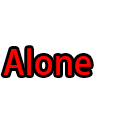
<style>
.page{position:relative;width:128px;height:128px;background:#ffffff}
.page>*{position:absolute;margin:0}
.t1{font:33.3px "AdobeHeitiStd-Regular";color:#ff0202}
</style>
<div class="page">
<p class="t1" style="left:3px;top:48px;width:88px;height:27px">Alone</p>
</div>
